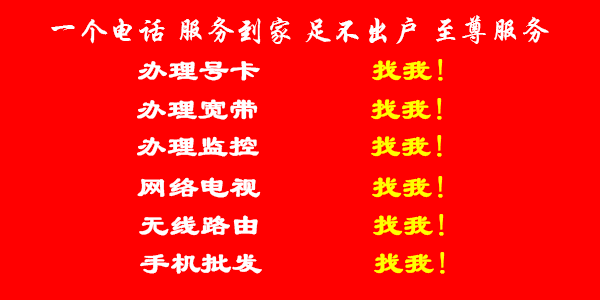
<style>
.page{position:relative;width:600px;height:300px;background:#ff0000}
.page>*{position:absolute;margin:0}
.t1{font:30px "STXingkai";color:#ffffff}
.t2{font:30px "LiSu";color:#ffffff;font-weight:bold}
.t3{font:30px "LiSu";color:#ffff00;font-weight:bold}
</style>
<div class="page">
<p class="t1" style="left:51px;top:15px;width:498px;height:29px">一个电话 服务到家 足不出户 至尊服务</p>
<p class="t2" style="left:138px;top:59px;width:305px;height:22px">办理号卡       <span class="t3">找我!</span></p>
<p class="t2" style="left:137px;top:98px;width:305px;height:22px">办理宽带       <span class="t3">找我!</span></p>
<p class="t2" style="left:137px;top:135px;width:305px;height:22px">办理监控       <span class="t3">找我!</span></p>
<p class="t2" style="left:137px;top:176px;width:306px;height:22px">网络电视       <span class="t3">找我!</span></p>
<p class="t2" style="left:139px;top:214px;width:305px;height:22px">无线路由       <span class="t3">找我!</span></p>
<p class="t2" style="left:140px;top:252px;width:305px;height:22px">手机批发       <span class="t3">找我!</span></p>
</div>
